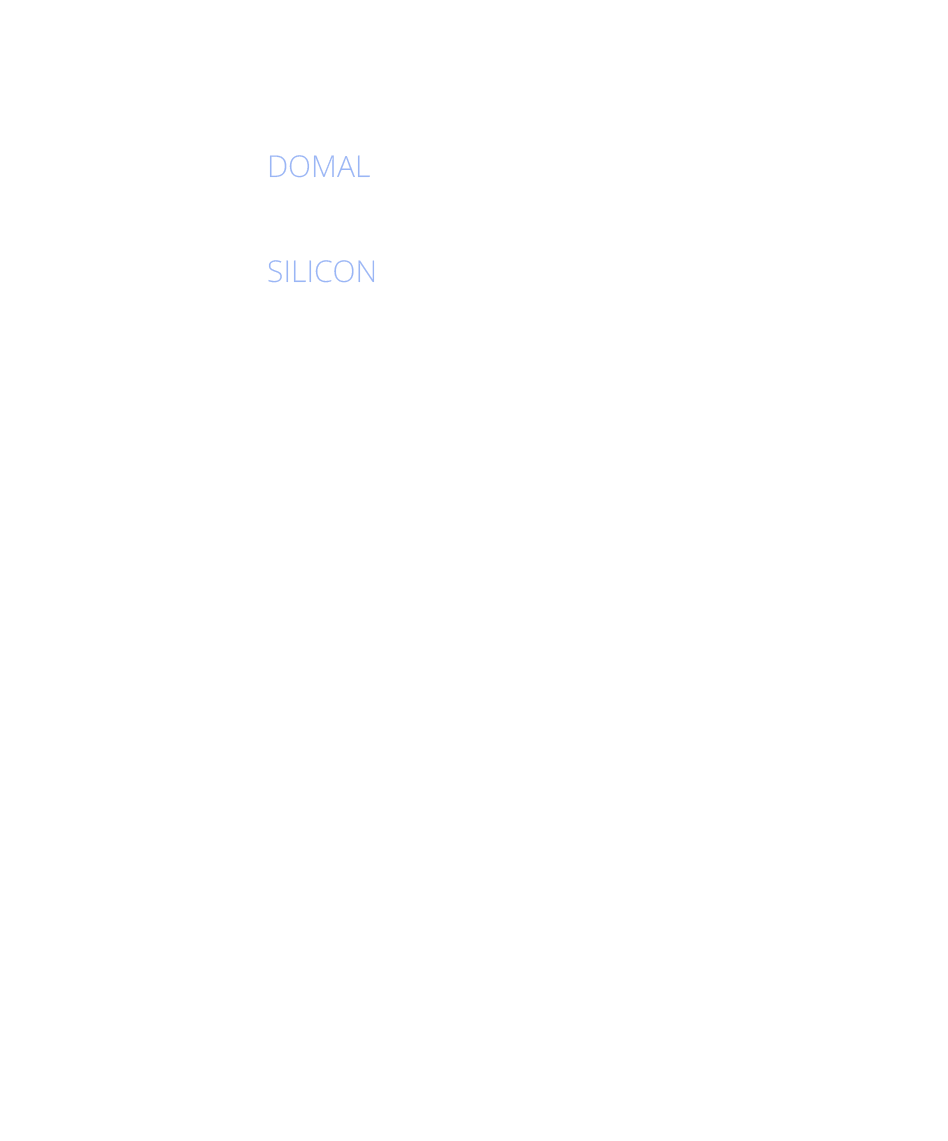
<style>
.page{position:relative;width:948px;height:1141px;background:#ffffff}
.page>*{position:absolute;margin:0}
.t1{font:30px/35px "OpenSans-Light";color:#9ab6f5}
</style>
<div class="page">
<p class="t1" style="left:268px;top:155px;width:107px;height:128px">DOMAL<br><br><br>SILICON</p>
</div>
